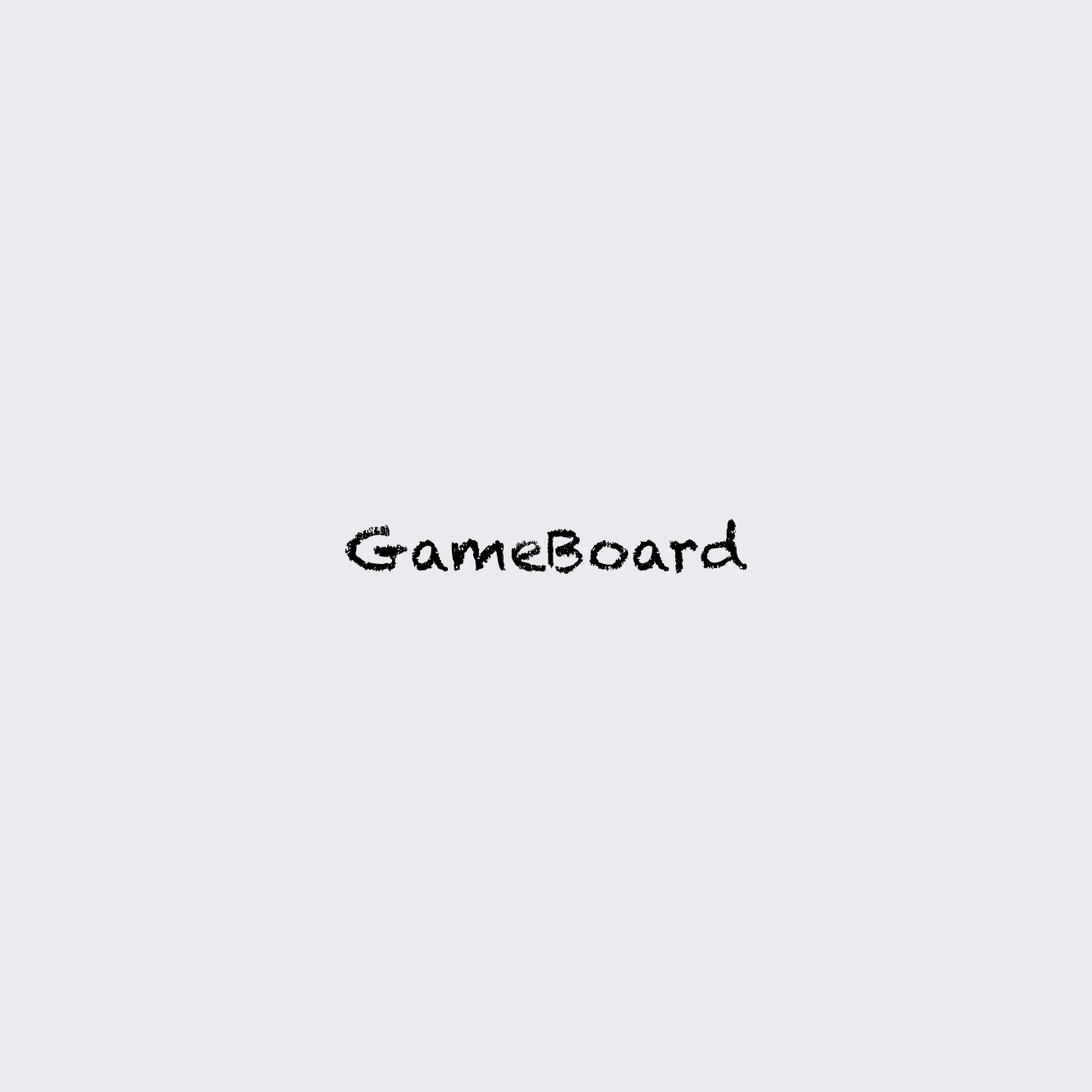
<style>
.page{position:relative;width:1092px;height:1092px;background:#eaebef}
.page>*{position:absolute;margin:0}
.t1{font:58.9px "Chalkduster";color:#000000}
</style>
<div class="page">
<p class="t1" style="left:345px;top:519px;width:402px;height:56px">GameBoard</p>
</div>
